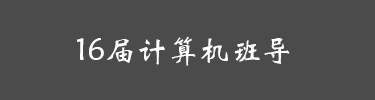
<style>
.page{position:relative;width:375px;height:100px;background:#4b4b4b}
.page>*{position:absolute;margin:0}
.t1{font:31.2px "STXinwei";color:#ffffff}
</style>
<div class="page">
<p class="t1" style="left:77px;top:36px;width:213px;height:30px">16届计算机班导</p>
</div>
